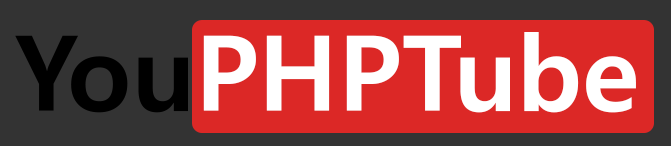
<style>
.page{position:relative;width:671px;height:146px;background:#333333}
.page>*{position:absolute;margin:0}
.t1{font:104.3px "MalgunGothicBold";color:#ffffff}
.t2{font:104.3px "MalgunGothicBold";color:#000000}
</style>
<div class="page">
<p class="t1" style="left:15px;top:32px;width:621px;height:81px"><span class="t2">You</span>PHPTube</p>
</div>
